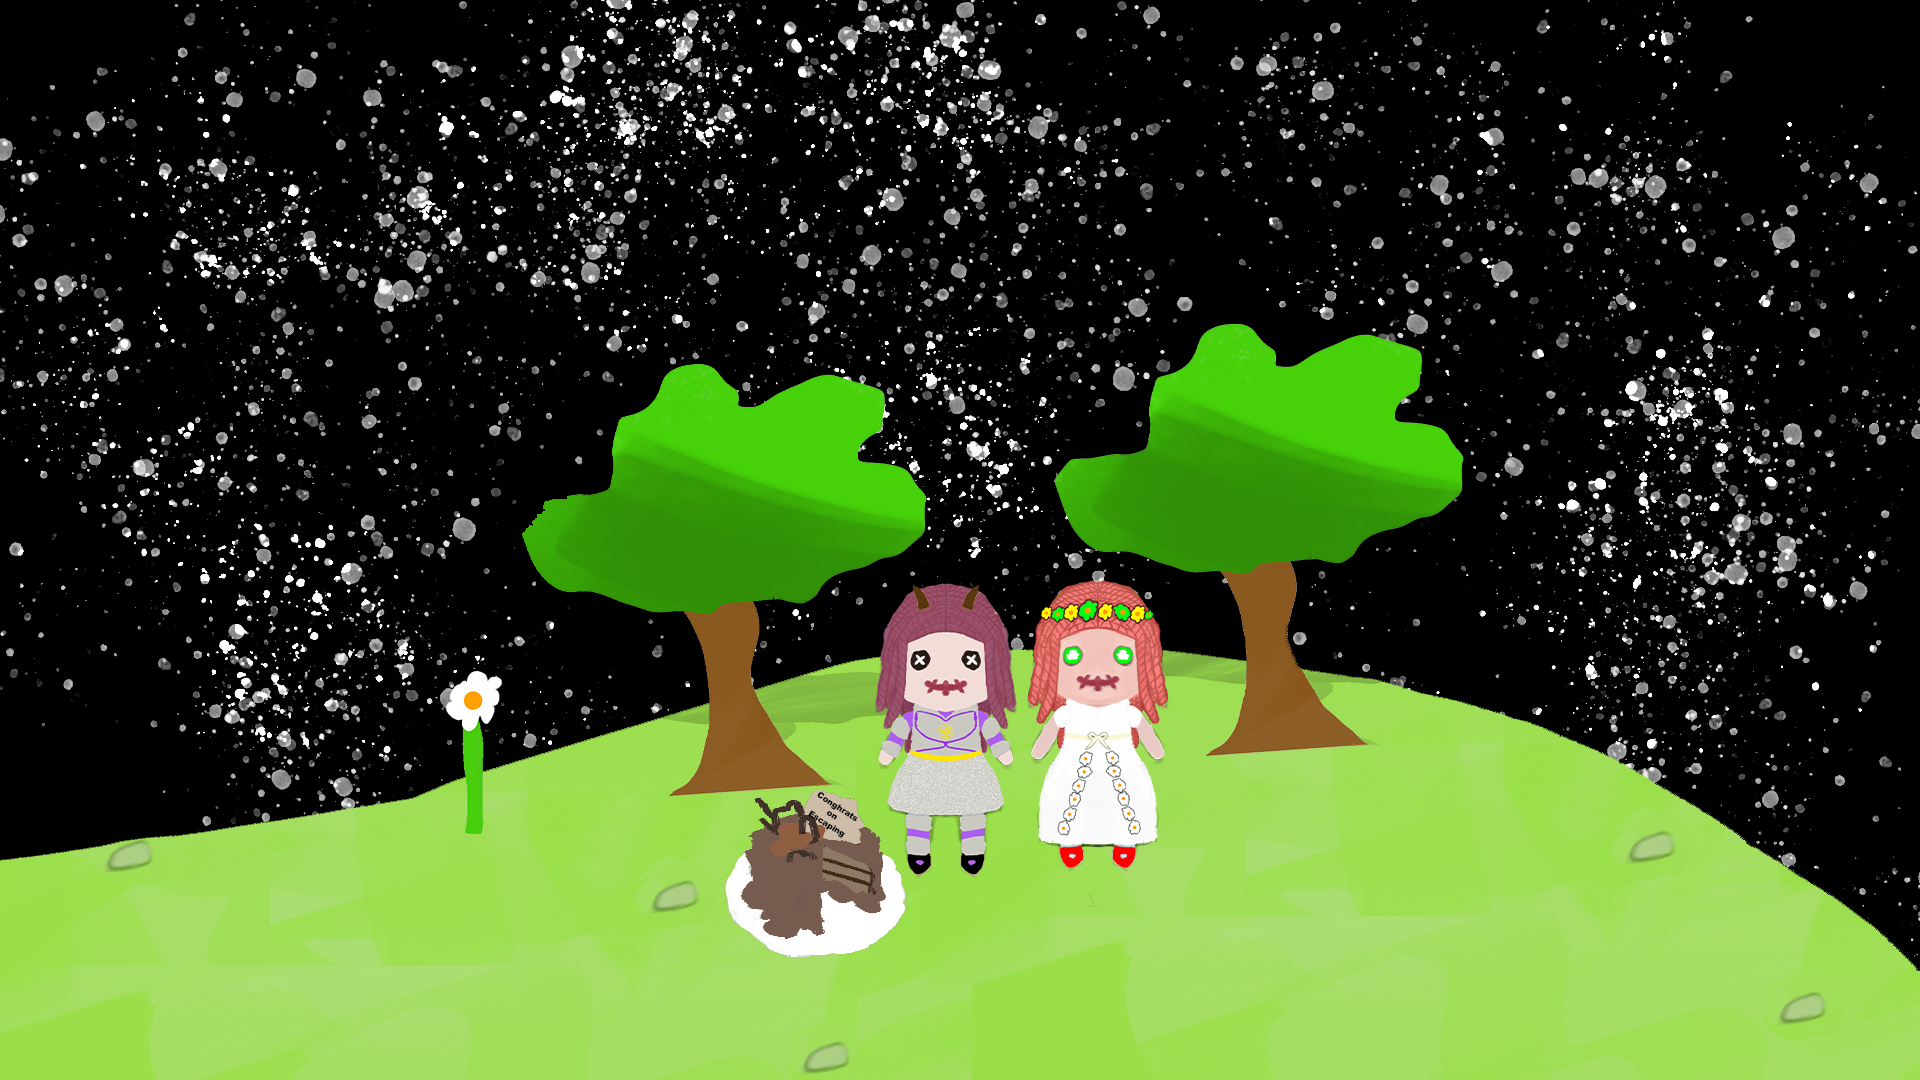
<style>
.page{position:relative;width:1920px;height:1080px;background:#000000}
.page>*{position:absolute;margin:0}
.t1{font:8.3px "Arial-Black";color:#000000}
</style>
<div class="page">
<p class="t1" style="left:808px;top:792px;width:50px;height:46px;rotate:33deg">Conghrats on Escaping</p>
</div>
